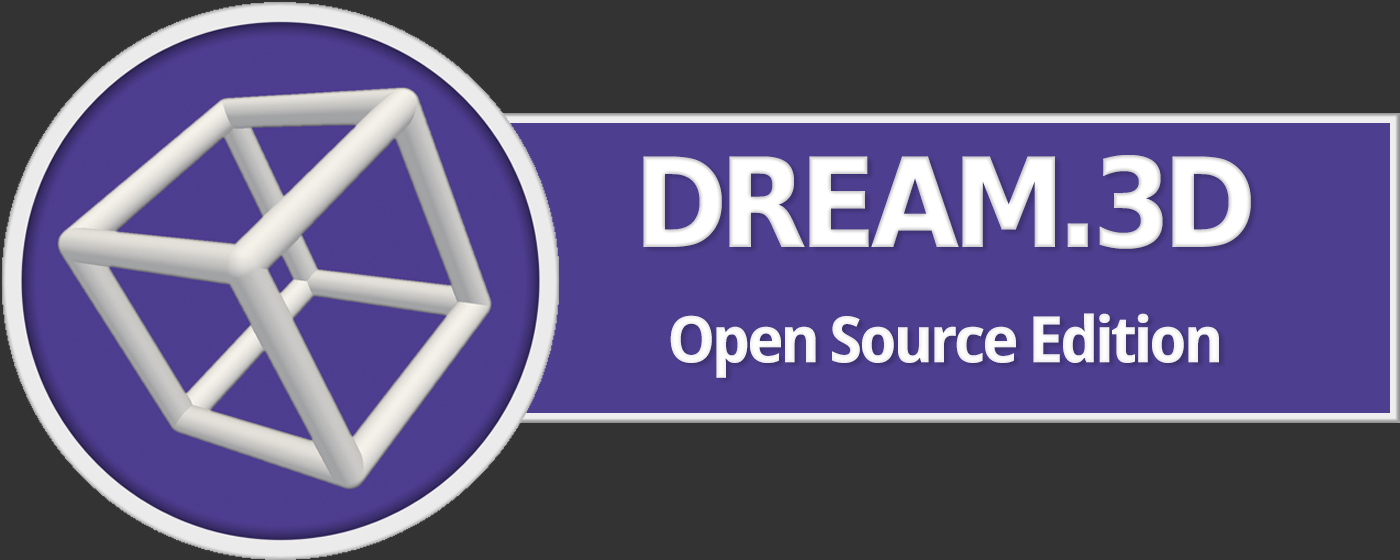
<style>
.page{position:relative;width:1400px;height:560px;background:#333333}
.page>*{position:absolute;margin:0}
.t1{font:124px "BitstreamVeraSans-Bold";letter-spacing:-0.06em;color:#ffffff;scale:0.92 1}
.t2{font:64px "DroidSans-Bold";letter-spacing:-0.06em;color:#ffffff}
</style>
<div class="page">
<p class="t1" style="left:643px;top:155px;width:608px;height:94px">DREAM.3D</p>
<p class="t2" style="left:670px;top:313px;width:549px;height:65px">Open Source Edition</p>
</div>
